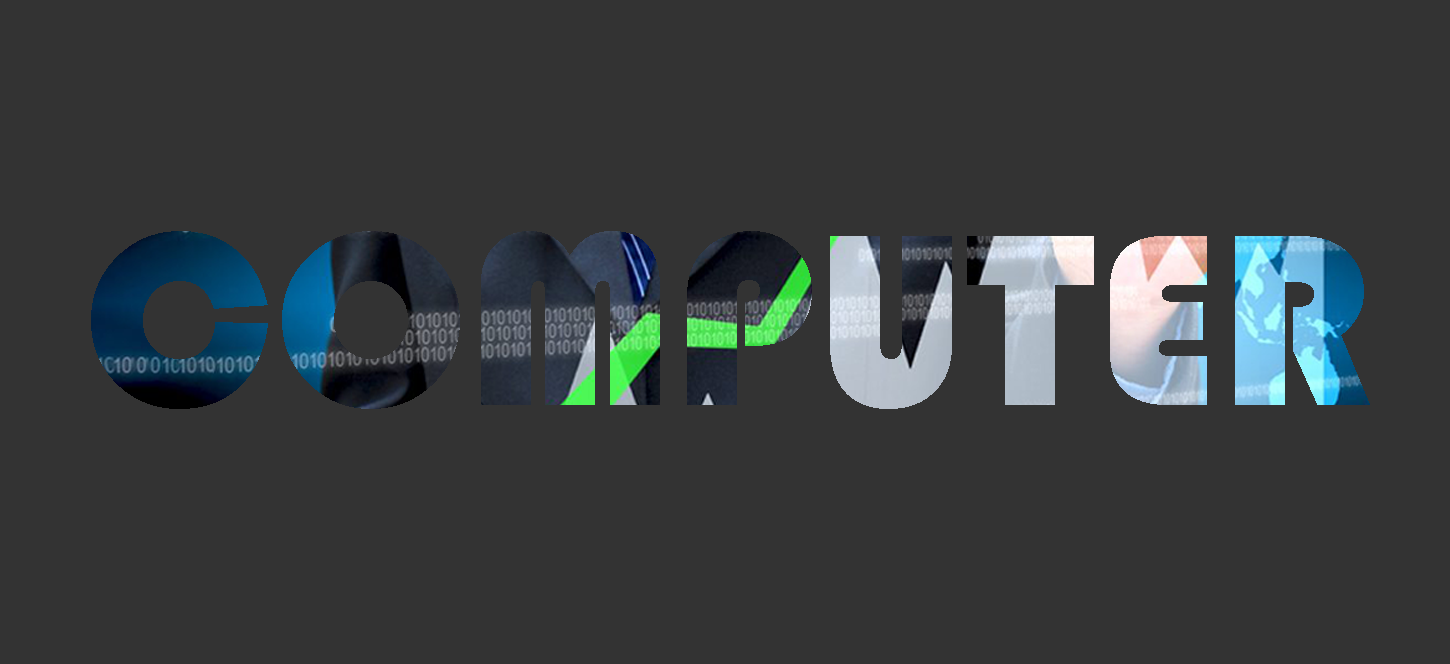
<style>
.page{position:relative;width:1450px;height:664px;background:#333333}
.page>*{position:absolute;margin:0}
.t1{font:253.9px "Bauhaus93"}
</style>
<div class="page">
<p class="t1" style="left:91px;top:231px;width:1279px;height:178px">COMPUTER</p>
</div>
